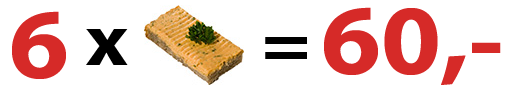
<style>
.page{position:relative;width:509px;height:90px;background:#ffffff}
.page>*{position:absolute;margin:0}
.t1{font:100px "MyriadPro-Bold";color:#d62a28;scale:1.08 1}
.t2{font:75px "MyriadPro-Bold";color:#000000;scale:1.08 1}
</style>
<div class="page">
<p class="t1" style="left:12px;top:11px;width:54px;height:68px">6</p>
<p class="t1" style="left:324px;top:7px;width:177px;height:78px">60,-</p>
<p class="t2" style="left:86px;top:29px;width:42px;height:36px">x</p>
<p class="t2" style="left:265px;top:37px;width:42px;height:22px">=</p>
</div>
